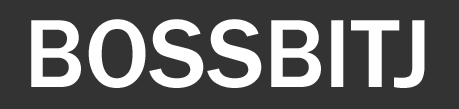
<style>
.page{position:relative;width:459px;height:109px;background:#333333}
.page>*{position:absolute;margin:0}
.t1{font:100px "FranklinGothic-Medium";color:#ffffff}
</style>
<div class="page">
<p class="t1" style="left:31px;top:19px;width:394px;height:69px">BOSSBITJ</p>
</div>
